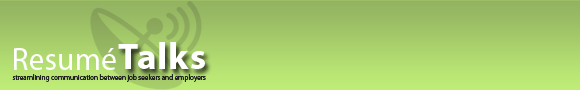
<style>
.page{position:relative;width:580px;height:90px}
.page>*{position:absolute;margin:0}
.t1{font:31.8px "Myriad-Roman";color:#ffffff}
.t2{font:37.1px "Myriad-Bold";letter-spacing:0.025em;color:#ffffff}
.t3{font:7.4px "Myriad-Roman";letter-spacing:-0.02em;color:#222222}
</style>
<div class="page">
<p class="t1" style="left:14px;top:48px;width:102px;height:22px">Resumé</p>
<p class="t2" style="left:118px;top:42px;width:87px;height:27px">Talks</p>
<p class="t3" style="left:12px;top:74px;width:194px;height:8px">streamlining communication between job seekers and employers</p>
</div>
